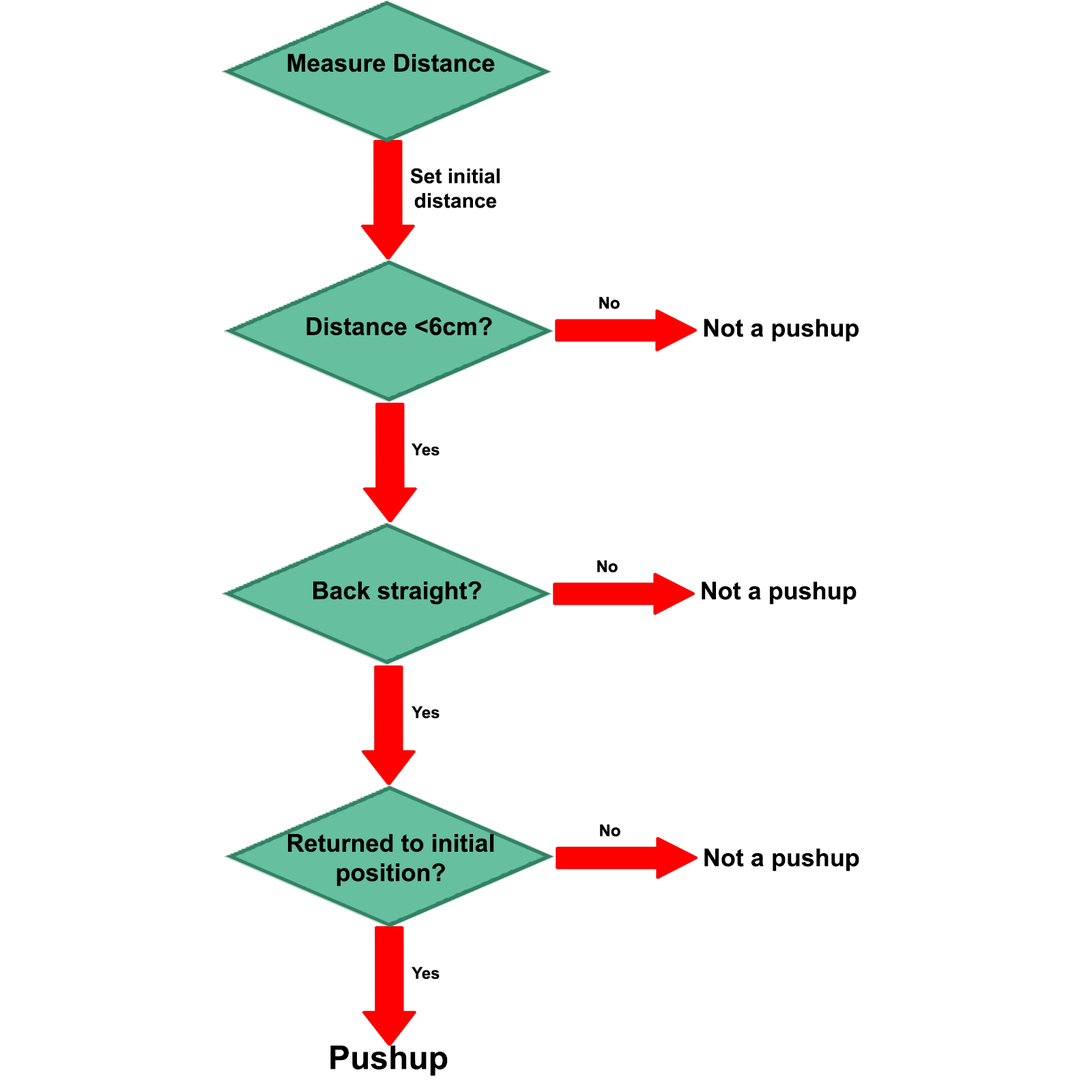
<style>
.page{position:relative;width:1092px;height:1092px;background:#ffffff}
.page>*{position:absolute;margin:0}
.t1{font:24.6px "Arial-BoldMT";color:#000000}
.t2{font:20.5px "Arial-BoldMT";color:#000000}
.t3{font:16.4px "Arial-BoldMT";color:#000000}
.t4{font:32.8px "Arial-BoldMT";color:#000000}
</style>
<div class="page">
<p class="t1" style="left:287px;top:54px;width:208px;height:18px">Measure Distance</p>
<p class="t2" style="left:410px;top:168px;width:90px;height:40px;text-align:center">Set initial distance</p>
<p class="t1" style="left:306px;top:317px;width:186px;height:19px">Distance &lt;6cm?</p>
<p class="t1" style="left:704px;top:319px;width:155px;height:23px">Not a pushup</p>
<p class="t3" style="left:412px;top:443px;width:28px;height:13px">Yes</p>
<p class="t1" style="left:313px;top:581px;width:168px;height:24px">Back straight?</p>
<p class="t1" style="left:702px;top:581px;width:155px;height:24px">Not a pushup</p>
<p class="t3" style="left:412px;top:706px;width:28px;height:13px">Yes</p>
<p class="t1" style="left:288px;top:834px;width:206px;height:53px;text-align:center">Returned to initial position?</p>
<p class="t1" style="left:704px;top:848px;width:155px;height:24px">Not a pushup</p>
<p class="t3" style="left:412px;top:966px;width:28px;height:13px">Yes</p>
<p class="t4" style="left:330px;top:1046px;width:118px;height:30px">Pushup</p>
</div>
